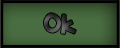
<style>
.page{position:relative;width:120px;height:48px}
.page>*{position:absolute;margin:0}
.t1{font:32px "Animated"}
</style>
<div class="page">
<p class="t1" style="left:44px;top:13px;width:32px;height:21px">Ok</p>
</div>
